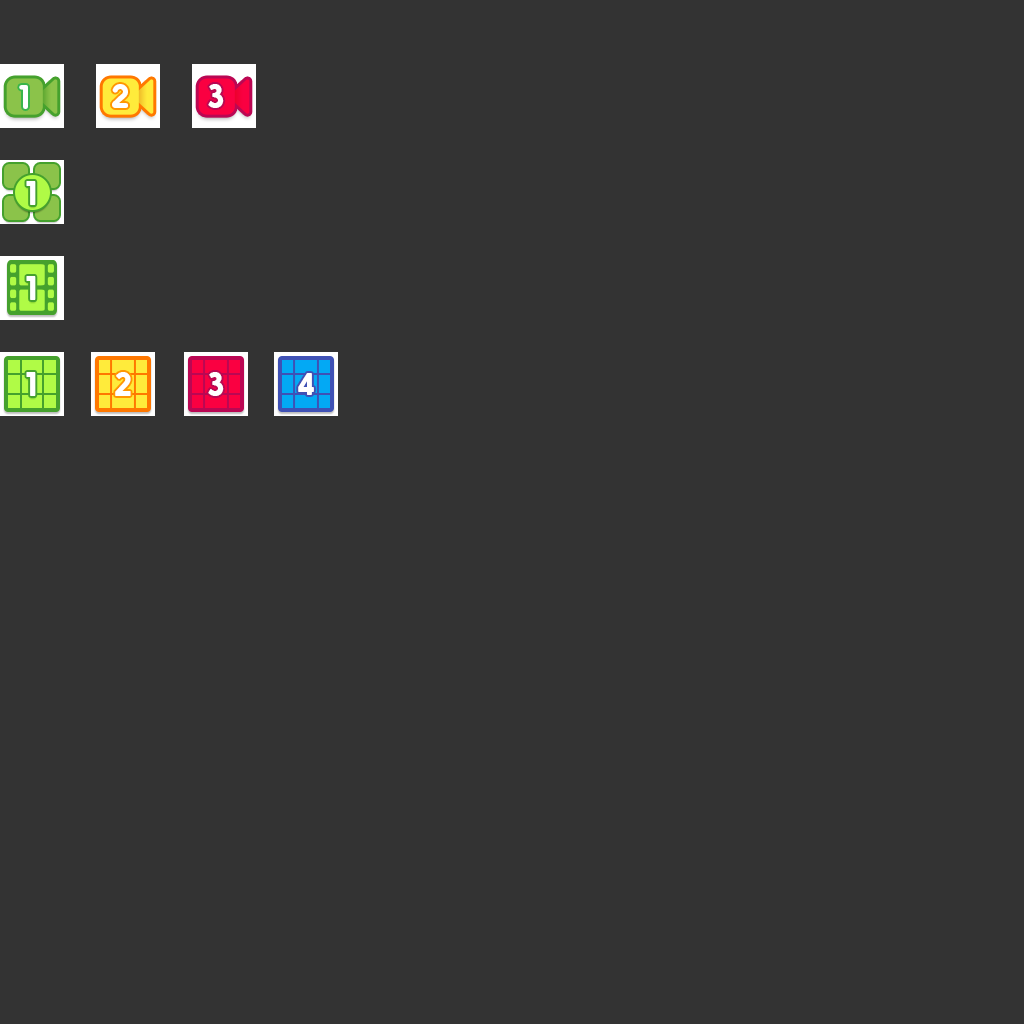
<style>
.page{position:relative;width:1024px;height:1024px;background:#333333}
.page>*{position:absolute;margin:0}
.t1{font:32px "HirukoPro-Bold";color:#ffffff}
.t2{font:32px "Nanami-Rounded-Bld";color:#ffffff}
.t3{font:30px "Nanami-Rounded-Bld";color:#ffffff}
</style>
<div class="page">
<p class="t1" style="left:19px;top:85px;width:9px;height:24px">1</p>
<p class="t1" style="left:112px;top:84px;width:16px;height:24px">2</p>
<p class="t2" style="left:208px;top:84px;width:16px;height:24px">3</p>
<p class="t2" style="left:26px;top:181px;width:10px;height:24px">1</p>
<p class="t2" style="left:26px;top:276px;width:10px;height:24px">1</p>
<p class="t2" style="left:26px;top:372px;width:10px;height:24px">1</p>
<p class="t2" style="left:115px;top:372px;width:16px;height:24px">2</p>
<p class="t2" style="left:208px;top:372px;width:16px;height:24px">3</p>
<p class="t3" style="left:298px;top:373px;width:16px;height:22px">4</p>
</div>
